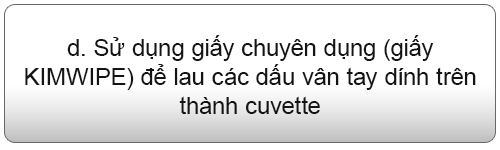
<style>
.page{position:relative;width:500px;height:150px;background:#ffffff}
.page>*{position:absolute;margin:0}
.t1{font:24px "ArialMT";color:#141414}
</style>
<div class="page">
<p class="t1" style="left:25px;top:35px;width:451px;height:79px;text-align:center">d. Sử dụng giấy chuyên dụng (giấy KIMWIPE) để lau các dấu vân tay dính trên thành cuvette</p>
</div>
